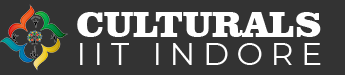
<style>
.page{position:relative;width:345px;height:75px;background:#333333}
.page>*{position:absolute;margin:0}
.t1{font:37.4px "ClarendonBT-Black";color:#ffffff}
.t2{font:31.6px "Montserrat-Regular";letter-spacing:0.24em;color:#ffffff}
</style>
<div class="page">
<p class="t1" style="left:77px;top:12px;width:244px;height:25px">CULTURALS</p>
<p class="t2" style="left:80px;top:43px;width:241px;height:22px">IIT INDORE</p>
</div>
